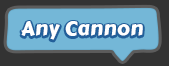
<style>
.page{position:relative;width:169px;height:66px;background:#74b7d7}
.page>*{position:absolute;margin:0}
.t1{font:20px "CarterOne";letter-spacing:0.025em;color:#ffffff}
</style>
<div class="page">
<p class="t1" style="left:21px;top:21px;width:122px;height:19px">Any Cannon</p>
</div>
